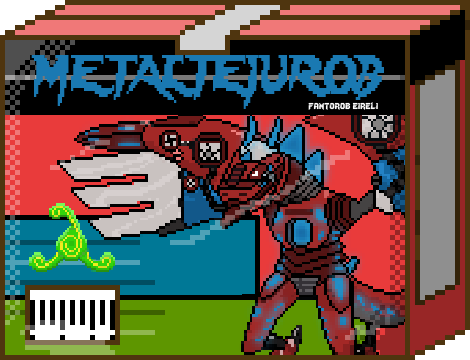
<style>
.page{position:relative;width:470px;height:360px}
.page>*{position:absolute;margin:0}
.t1{font:48px "Lady-Radical";color:#1a79b2;scale:0.72 1}
.t2{font:12px "Lady-Radical";color:#fbfbfb}
</style>
<div class="page">
<p class="t1" style="left:31px;top:55px;width:353px;height:54px">METALTEIUROB</p>
<p class="t2" style="left:308px;top:102px;width:70px;height:8px">fantorob eireli</p>
</div>
